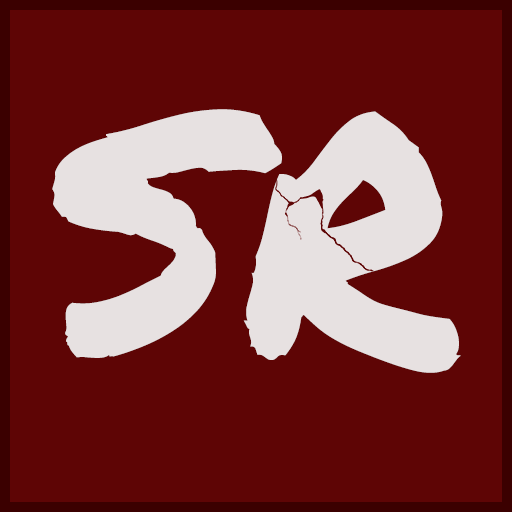
<style>
.page{position:relative;width:512px;height:512px;background:#5e0505}
.page>*{position:absolute;margin:0}
.t1{font:338.5px "PermanentMarker";color:#e7e1e1}
</style>
<div class="page">
<p class="t1" style="left:52px;top:109px;width:409px;height:264px;rotate:1deg">SR</p>
</div>
